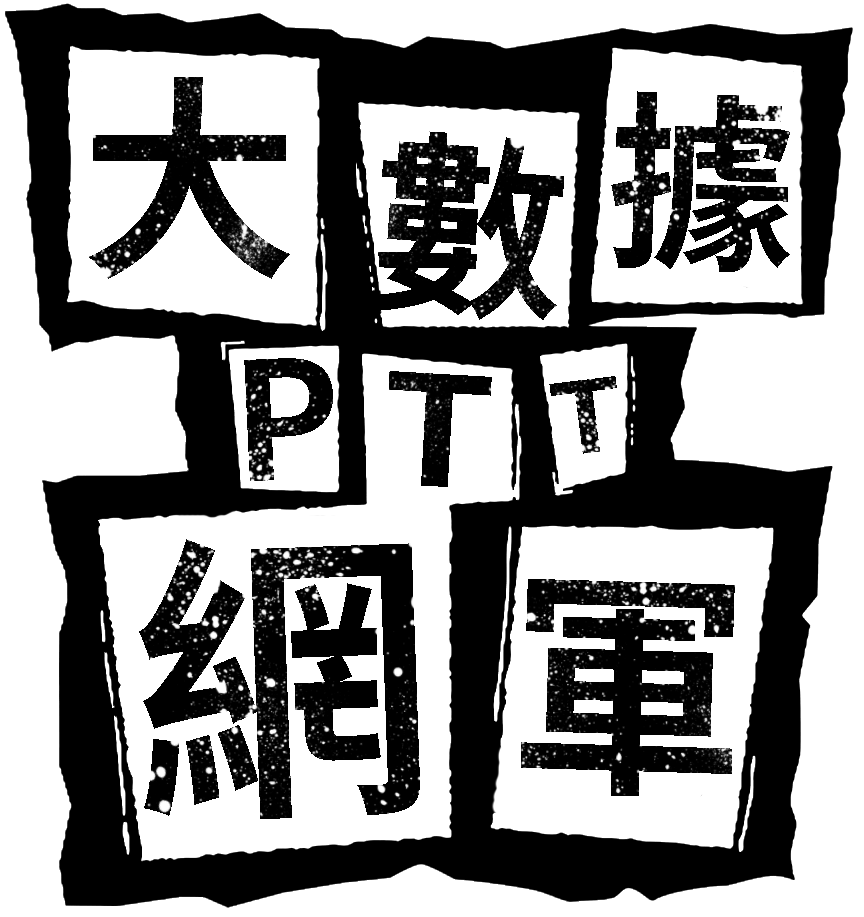
<style>
.page{position:relative;width:864px;height:917px;background:#ffffff}
.page>*{position:absolute;margin:0}
.t1{font:218.1px "NotoSansCJKtc-Bold";color:#000000}
.t2{font:189.7px "NotoSansCJKtc-Bold";color:#000000}
.t3{font:196.4px "NotoSansCJKtc-Bold";color:#000000}
.t4{font:164.1px "NotoSansCJKtc-Bold";color:#000000}
.t5{font:152px "NotoSansCJKtc-Bold";color:#000000;scale:1.19 1}
.t6{font:98.7px "NotoSansCJKtc-Bold";color:#000000;scale:1.19 1}
.t7{font:302.7px "NotoSansCJKtc-Bold";color:#000000}
.t8{font:241.2px "NotoSansCJKtc-Bold";color:#000000}
</style>
<div class="page">
<p class="t1" style="left:89px;top:77px;width:201px;height:202px">大</p>
<p class="t2" style="left:611px;top:91px;width:179px;height:181px;rotate:2deg">據</p>
<p class="t3" style="left:371px;top:131px;width:193px;height:189px;rotate:4deg">數</p>
<p class="t4" style="left:244px;top:358px;width:89px;height:123px;rotate:-3deg">P</p>
<p class="t5" style="left:389px;top:371px;width:103px;height:116px;rotate:3deg">T</p>
<p class="t6" style="left:549px;top:376px;width:68px;height:78px;rotate:-7deg">T</p>
<p class="t7" style="left:139px;top:539px;width:281px;height:280px;rotate:-2deg">網</p>
<p class="t8" style="left:521px;top:579px;width:214px;height:217px;rotate:2deg">軍</p>
</div>
